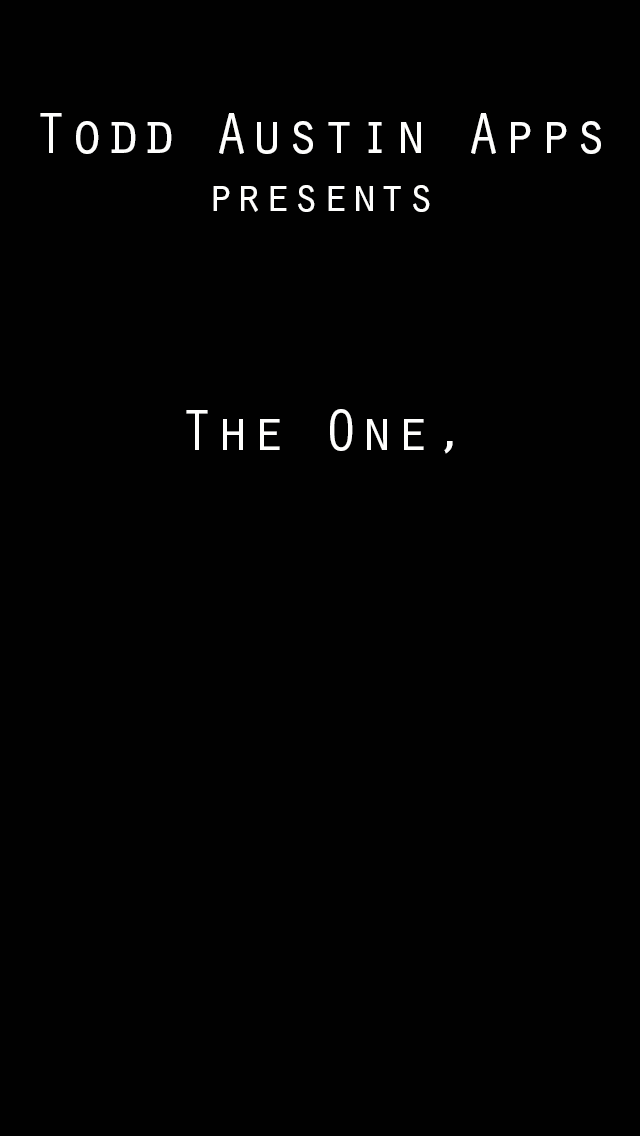
<style>
.page{position:relative;width:640px;height:1136px;background:#010101}
.page>*{position:absolute;margin:0}
.t1{font:60px "OratorStd";color:#fefefd}
.t2{font:48px "OratorStd";color:#fefefd}
</style>
<div class="page">
<p class="t1" style="left:40px;top:113px;width:561px;height:99px;text-align:center">Todd Austin Apps<br><span class="t2">presents</span></p>
<p class="t1" style="left:186px;top:409px;width:267px;height:45px">The One,</p>
</div>
